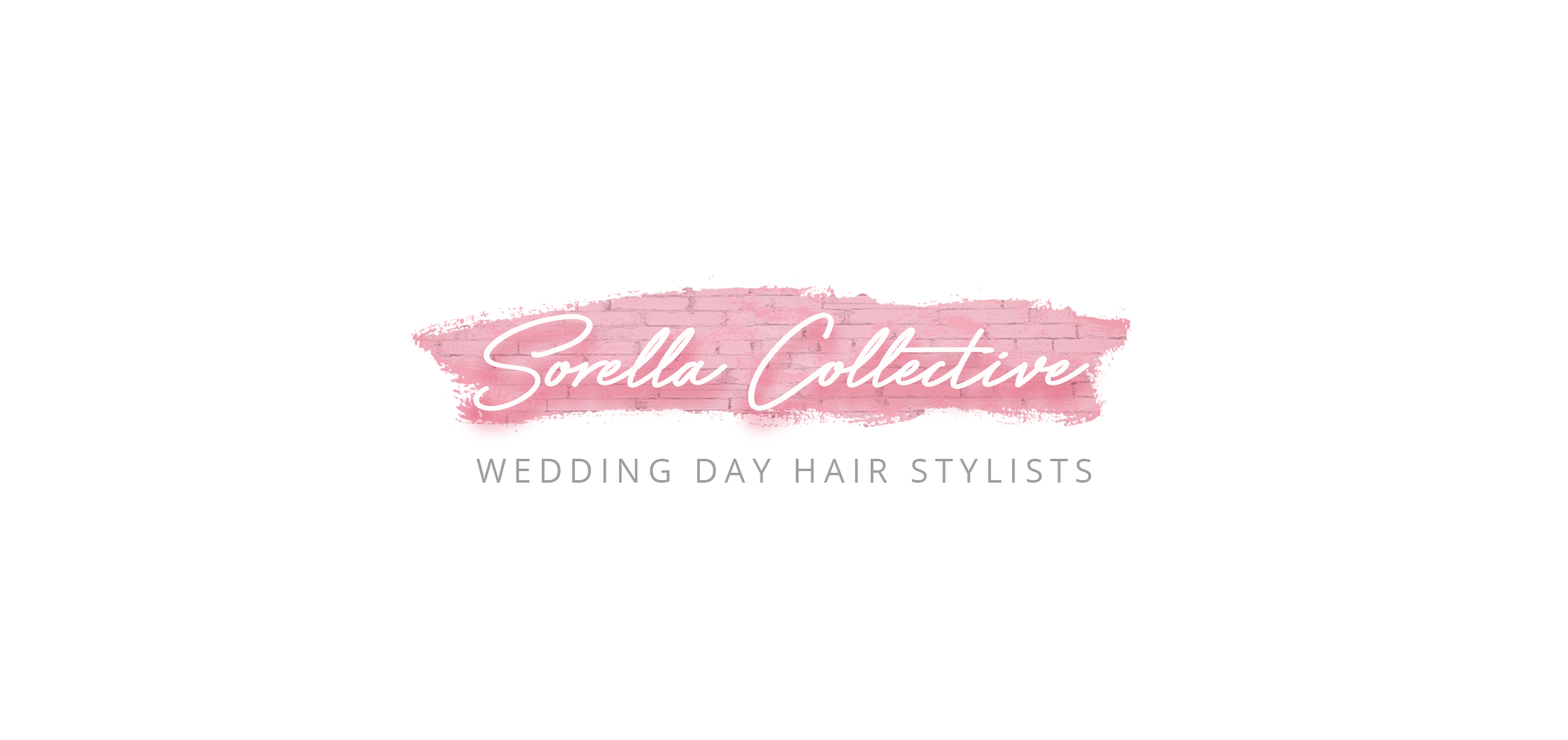
<style>
.page{position:relative;width:1568px;height:740px;background:#ffffff}
.page>*{position:absolute;margin:0}
.t1{font:127.3px "Bayshore";color:#ffffff}
.t2{font:33.2px "OpenSans";letter-spacing:0.2em;color:#9f9f9f}
</style>
<div class="page">
<p class="t1" style="left:474px;top:313px;width:615px;height:97px;opacity:0.96">Sorella Collective</p>
<p class="t2" style="left:476px;top:459px;width:615px;height:24px">WEDDING DAY HAIR STYLISTS</p>
</div>
